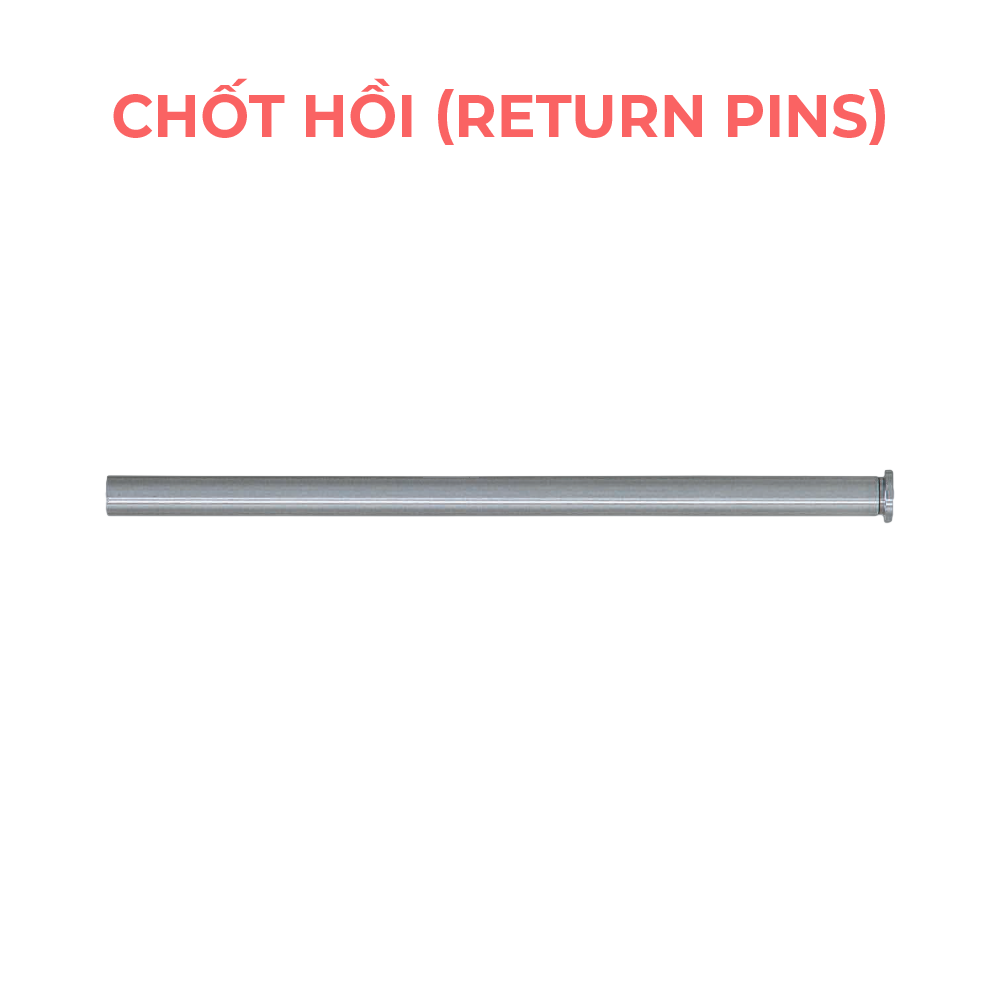
<style>
.page{position:relative;width:1000px;height:1000px;background:#ffffff}
.page>*{position:absolute;margin:0}
.t1{font:51px "Montserrat-Bold";color:#fa6363;text-transform:uppercase}
</style>
<div class="page">
<p class="t1" style="left:113px;top:78px;width:772px;height:67px">Chốt hồi (Return Pins)</p>
</div>
